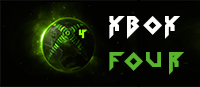
<style>
.page{position:relative;width:200px;height:87px;background:#020301}
.page>*{position:absolute;margin:0}
.t1{font:30px "Tolerant";letter-spacing:0.2em;color:#fdfdfd}
.t2{font:30px "Tolerant";letter-spacing:0.2em;color:#59b52e}
.t3{font:16.3px "Tolerant";color:#94f908}
</style>
<div class="page">
<p class="t1" style="left:109px;top:16px;width:75px;height:59px">Xbox<br><span class="t2">Four</span></p>
<p class="t3" style="left:78px;top:29px;width:9px;height:10px">4</p>
</div>
